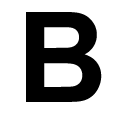
<style>
.page{position:relative;width:120px;height:120px;background:#ffffff}
.page>*{position:absolute;margin:0}
.t1{font:125px "Arial-BoldMT";color:#000000}
</style>
<div class="page">
<p class="t1" style="left:26px;top:12px;width:76px;height:90px">B</p>
</div>
